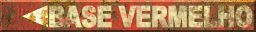
<style>
.page{position:relative;width:256px;height:32px}
.page>*{position:absolute;margin:0}
.t1{font:29.3px "Arial-Black";letter-spacing:-0.04em;text-transform:uppercase;font-weight:bold;scale:0.74 1}
</style>
<div class="page">
<p class="t1" style="left:49px;top:5px;width:204px;height:23px">basE VERMELHO</p>
</div>
